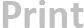
<style>
.page{position:relative;width:84px;height:28px;background:#ffffff}
.page>*{position:absolute;margin:0}
.t1{font:41.7px "Calibri-Bold";color:#c0c0c0}
</style>
<div class="page">
<p class="t1" style="left:2px;top:0px;width:82px;height:28px">Print</p>
</div>
